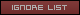
<style>
.page{position:relative;width:80px;height:15px}
.page>*{position:absolute;margin:0}
.t1{font:8px "BitDustTwo";color:#afaeae}
</style>
<div class="page">
<p class="t1" style="left:12px;top:5px;width:55px;height:5px">IGNORE LIST</p>
</div>
